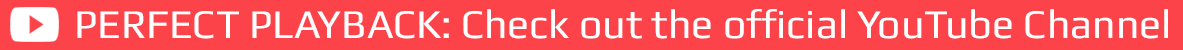
<style>
.page{position:relative;width:1183px;height:50px;background:#fc4349}
.page>*{position:absolute;margin:0}
.t1{font:41px "Play";color:#ffffff}
</style>
<div class="page">
<p class="t1" style="left:77px;top:9px;width:1091px;height:30px">PERFECT PLAYBACK: Check out the official YouTube Channel</p>
</div>
